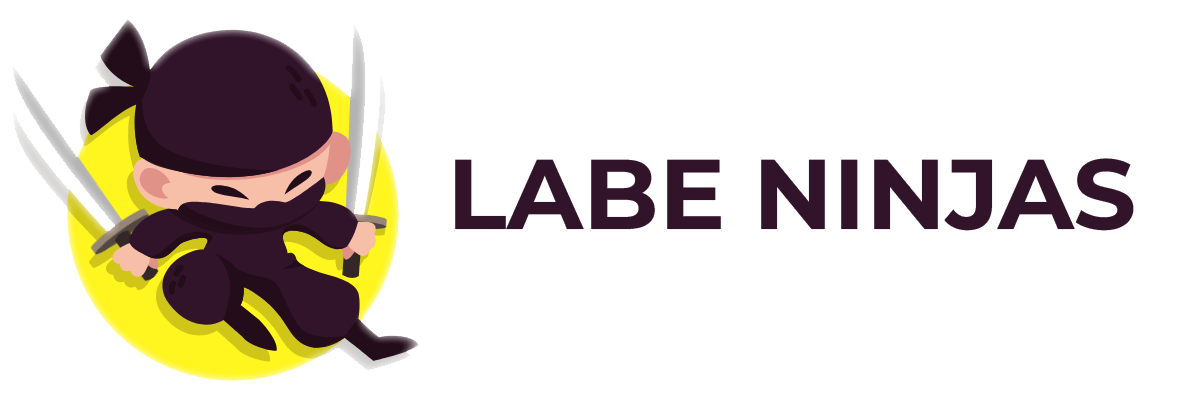
<style>
.page{position:relative;width:1200px;height:400px;background:#ffffff}
.page>*{position:absolute;margin:0}
.t1{font:98.9px "MontserratRoman-Bold";color:#32142a}
</style>
<div class="page">
<p class="t1" style="left:455px;top:158px;width:679px;height:73px">LABE NINJAS</p>
</div>
